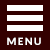
<style>
.page{position:relative;width:50px;height:50px;background:#330000}
.page>*{position:absolute;margin:0}
.t1{font:10px "Lato-Black";letter-spacing:0.16em;color:#ffffff}
</style>
<div class="page">
<p class="t1" style="left:7px;top:37px;width:34px;height:8px">MENU</p>
</div>
